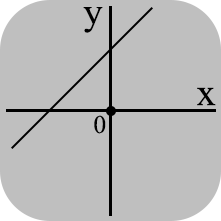
<style>
.page{position:relative;width:221px;height:221px;background:#bfbfbf}
.page>*{position:absolute;margin:0}
.t1{font:38.3px "TimesNewRomanPSMT";color:#000000}
.t2{font:25.6px "TimesNewRomanPSMT";color:#000000}
</style>
<div class="page">
<p class="t1" style="left:83px;top:7px;width:20px;height:26px">y</p>
<p class="t1" style="left:197px;top:87px;width:19px;height:19px">x</p>
<p class="t2" style="left:94px;top:115px;width:12px;height:19px">0</p>
</div>
